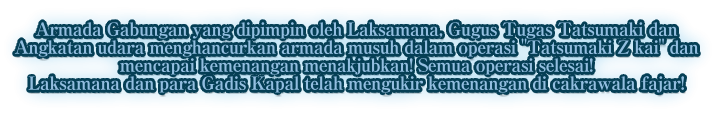
<style>
.page{position:relative;width:714px;height:115px}
.page>*{position:absolute;margin:0}
.t1{font:18px/18px "RyuminPro-ExBold";letter-spacing:-0.04em;color:#93bee0}
</style>
<div class="page">
<p class="t1" style="left:14px;top:22px;width:685px;height:71px;text-align:center">Armada Gabungan yang dipimpin oleh Laksamana, Gugus Tugas Tatsumaki dan<br>Angkatan udara menghancurkan armada musuh dalam operasi "Tatsumaki Z kai" dan<br>mencapai kemenangan menakjubkan! Semua operasi selesai!<br>Laksamana dan para Gadis Kapal telah mengukir kemenangan di cakrawala fajar!</p>
</div>
